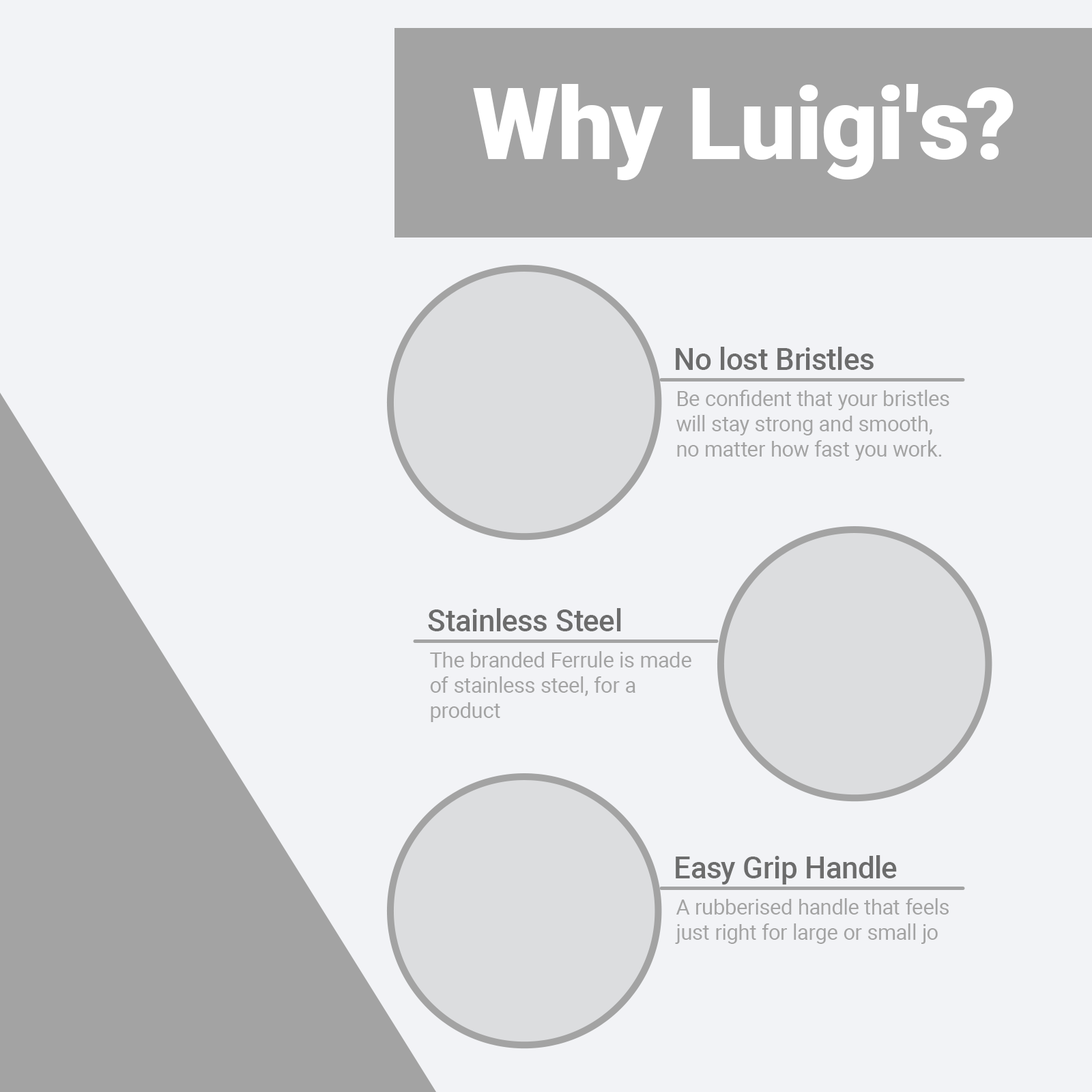
<style>
.page{position:relative;width:1092px;height:1092px;background:#f2f3f6}
.page>*{position:absolute;margin:0}
.t1{font:99.4px "Roboto-Black";color:#ffffff}
.t2{font:29.9px "Roboto-Medium";color:#6c6c6c}
.t3{font:20.9px "Roboto-Regular";color:#a3a3a3}
</style>
<div class="page">
<p class="t1" style="left:473px;top:84px;width:540px;height:96px">Why Luigi's?</p>
<p class="t2" style="left:676px;top:347px;width:198px;height:23px">No lost Bristles</p>
<p class="t3" style="left:676px;top:390px;width:273px;height:71px">Be confident that your bristles will stay strong and smooth, no matter how fast you work.</p>
<p class="t2" style="left:428px;top:608px;width:193px;height:23px">Stainless Steel</p>
<p class="t3" style="left:430px;top:651px;width:261px;height:71px">The branded Ferrule is made of stainless steel, for a product</p>
<p class="t2" style="left:676px;top:855px;width:221px;height:30px">Easy Grip Handle</p>
<p class="t3" style="left:675px;top:898px;width:274px;height:46px">A rubberised handle that feels just right for large or small jo</p>
</div>
